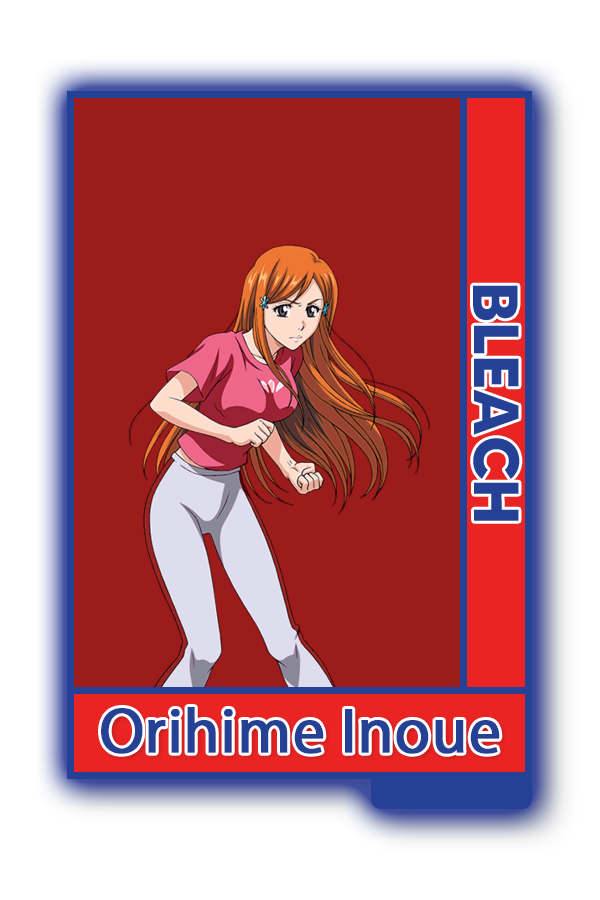
<style>
.page{position:relative;width:600px;height:900px;background:#9c1c1b}
.page>*{position:absolute;margin:0}
.t1{font:63.6px "MADETOMMY-Bold";color:#254195}
.t2{font:63.6px "MyriadPro-Regular";color:#254195;font-weight:bold}
</style>
<div class="page">
<p class="t1" style="left:473px;top:285px;width:47px;height:236px;rotate:90deg">BLEACH</p>
<p class="t2" style="left:101px;top:707px;width:399px;height:47px">Orihime Inoue</p>
</div>
